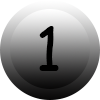
<style>
.page{position:relative;width:100px;height:100px;background:#ffffff}
.page>*{position:absolute;margin:0}
.t1{font:60px "ComicSansMS";color:#000000}
</style>
<div class="page">
<p class="t1" style="left:39px;top:26px;width:20px;height:45px">1</p>
</div>
